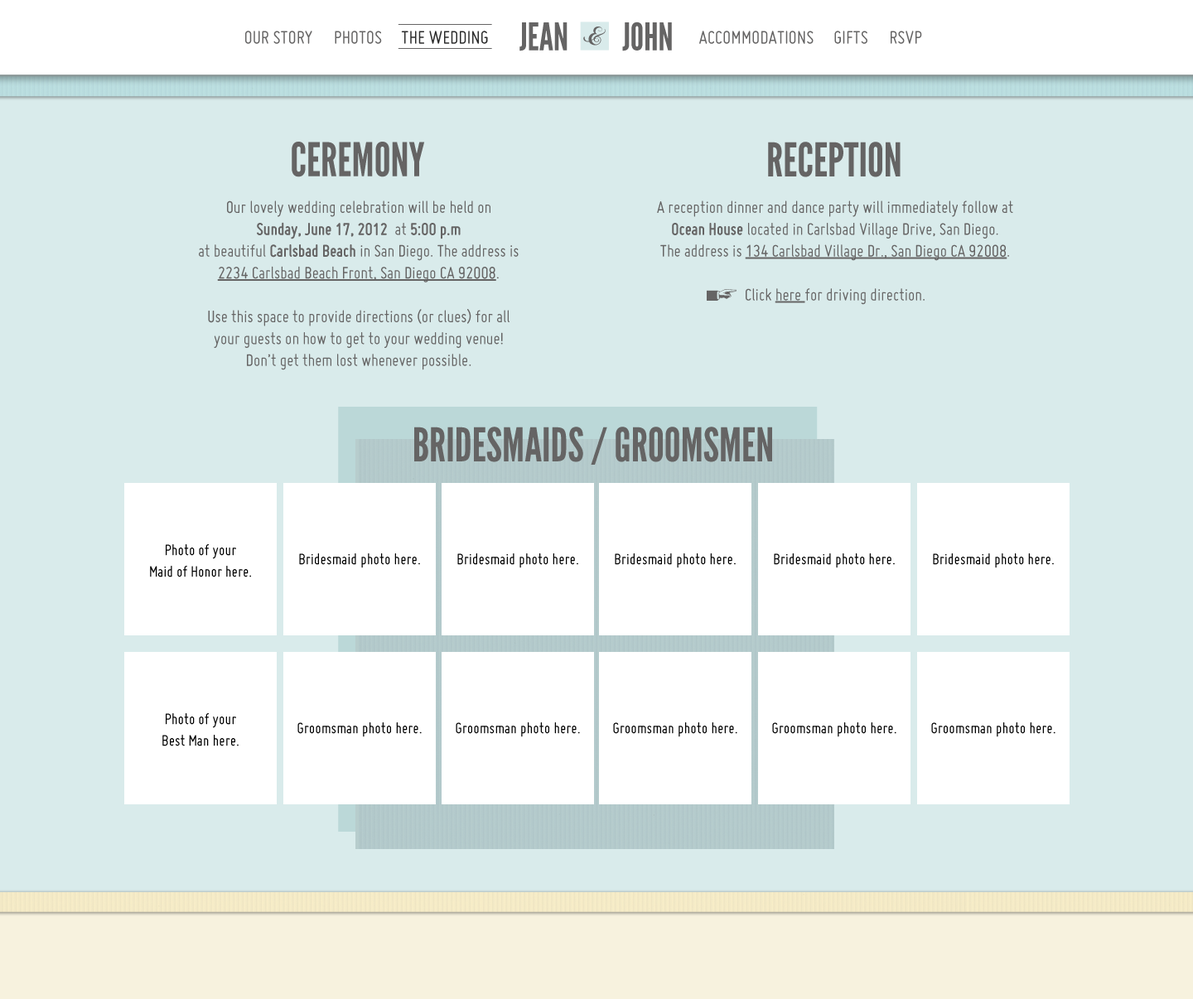
<style>
.page{position:relative;width:1193px;height:999px;background:#d9ebeb}
.page>*{position:absolute;margin:0}
.t1{font:38.1px "LeagueGothic";color:#656464;text-transform:uppercase}
.t2{font:19.9px "Miso";color:#656464;text-transform:uppercase}
.t3{font:19.9px "Miso";color:#2b2b2b;text-transform:uppercase}
.t4{font:46.4px "LeagueGothic";color:#656464;text-transform:uppercase}
.t5{font:18.2px "Miso";color:#656464}
.t6{font:18.2px "Miso-Bold";color:#656464}
.t7{font:18.2px "Miso";color:#656464;text-decoration:underline}
.t8{font:16.6px/21.6px "Miso";color:#000000}
.t9{font:16.6px "Miso";color:#000000}
</style>
<div class="page">
<p class="t1" style="left:520px;top:22px;width:48px;height:29px">JEAN</p>
<p class="t1" style="left:622px;top:22px;width:50px;height:29px">JOHN</p>
<p class="t2" style="left:245px;top:31px;width:67px;height:13px">our story</p>
<p class="t2" style="left:335px;top:31px;width:47px;height:13px">photos</p>
<p class="t3" style="left:401px;top:31px;width:87px;height:13px">the wedding</p>
<p class="t2" style="left:699px;top:31px;width:115px;height:13px">accommodations</p>
<p class="t2" style="left:834px;top:31px;width:34px;height:13px">gifts</p>
<p class="t2" style="left:891px;top:31px;width:31px;height:13px">rsvp</p>
<p class="t4" style="left:292px;top:142px;width:133px;height:35px">ceremony</p>
<p class="t4" style="left:768px;top:142px;width:133px;height:35px">reception</p>
<p class="t5" style="left:199px;top:201px;width:320px;height:169px;text-align:center">Our lovely wedding celebration will be held on <br><span class="t6">Sunday, June 17, 2012</span>  at <span class="t6">5:00 p.m</span> <br>at beautiful <span class="t6">Carlsbad Beach</span> in San Diego. The address is <span class="t7">2234 Carlsbad Beach Front, San Diego CA 92008</span>. <br><br>Use this space to provide directions (or clues) for all your guests on how to get to your wedding venue! <br>Don’t get them lost whenever possible.</p>
<p class="t5" style="left:657px;top:201px;width:356px;height:104px;text-align:center">A reception dinner and dance party will immediately follow at <span class="t6">Ocean House</span> located in Carlsbad Village Drive, San Diego. <br>The address is <span class="t7">134 Carlsbad Village Dr., San Diego CA 92008</span>. <br><br>Click <span class="t7">here </span>for driving direction.</p>
<p class="t4" style="left:414px;top:427px;width:358px;height:38px">bridesmaids / groomsmen</p>
<p class="t8" style="left:150px;top:544px;width:101px;height:34px;text-align:center"><span class="t9"><br><br><br></span>Photo of your <br>Maid of Honor here.</p>
<p class="t9" style="left:299px;top:554px;width:121px;height:14px">Bridesmaid photo here.</p>
<p class="t9" style="left:457px;top:554px;width:121px;height:14px">Bridesmaid photo here.</p>
<p class="t9" style="left:615px;top:554px;width:121px;height:14px">Bridesmaid photo here.</p>
<p class="t9" style="left:774px;top:554px;width:121px;height:14px">Bridesmaid photo here.</p>
<p class="t9" style="left:933px;top:554px;width:121px;height:14px">Bridesmaid photo here.</p>
<p class="t8" style="left:162px;top:713px;width:77px;height:34px;text-align:center"><span class="t9"><br><br><br></span>Photo of your <br>Best Man here.</p>
<p class="t9" style="left:297px;top:723px;width:125px;height:14px">Groomsman photo here.</p>
<p class="t9" style="left:456px;top:723px;width:124px;height:14px">Groomsman photo here.</p>
<p class="t9" style="left:613px;top:723px;width:124px;height:14px">Groomsman photo here.</p>
<p class="t9" style="left:772px;top:723px;width:125px;height:14px">Groomsman photo here.</p>
<p class="t9" style="left:931px;top:723px;width:125px;height:14px">Groomsman photo here.</p>
</div>
